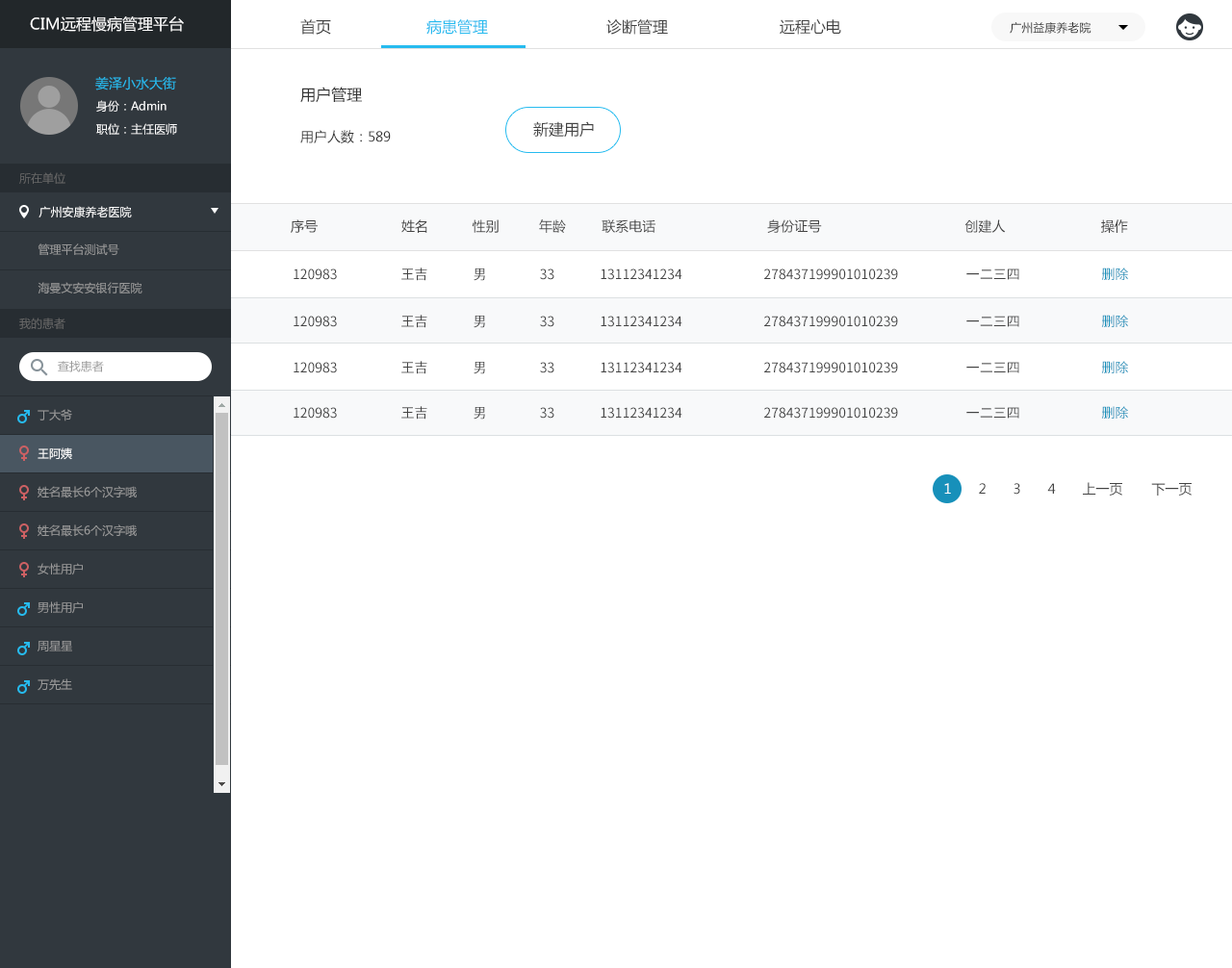
<style>
.page{position:relative;width:1232px;height:968px;background:#ffffff}
.page>*{position:absolute;margin:0}
.t1{font:15.4px "MicrosoftYaHei";color:#ffffff}
.t2{font:15.4px "MicrosoftYaHei";color:#434343}
.t3{font:15.4px "MicrosoftYaHei";color:#26bbef}
.t4{font:11.5px "MicrosoftYaHei";color:#333333}
.t5{font:13.5px "MicrosoftYaHei";color:#26bbef}
.t6{font:15.4px "MicrosoftYaHei";color:#333333}
.t7{font:11.5px "MicrosoftYaHei";color:#ffffff}
.t8{font:13.5px "MicrosoftYaHei";color:#333333}
.t9{font:11.5px "MicrosoftYaHei";color:#666666}
.t10{font:13.5px "MicrosoftYaHei";color:#434343}
.t11{font:11.5px "MicrosoftYaHei";color:#999999}
.t12{font:13.5px "NotoSansHans-Regular";color:#434343}
.t13{font:13.5px "NotoSansHans-Regular";color:#1790ba}
.t14{font:11.5px/19.2px "MicrosoftYaHei";color:#999999}
.t15{font:11.5px/19.2px "MicrosoftYaHei";color:#ffffff}
.t16{font:13.5px "MicrosoftYaHei";color:#ffffff}
</style>
<div class="page">
<p class="t1" style="left:30px;top:16px;width:154px;height:16px">CIM远程慢病管理平台</p>
<p class="t2" style="left:300px;top:19px;width:31px;height:16px">首页</p>
<p class="t3" style="left:426px;top:19px;width:62px;height:16px">病患管理</p>
<p class="t2" style="left:606px;top:19px;width:235px;height:16px">诊断管理    远程心电</p>
<p class="t4" style="left:1009px;top:22px;width:82px;height:12px">广州益康养老院</p>
<p class="t5" style="left:95px;top:76px;width:81px;height:14px">姜泽小水大街</p>
<p class="t6" style="left:300px;top:87px;width:62px;height:16px">用户管理</p>
<p class="t7" style="left:96px;top:100px;width:70px;height:12px">身份：Admin</p>
<p class="t7" style="left:96px;top:123px;width:81px;height:12px">职位：主任医师</p>
<p class="t2" style="left:533px;top:121px;width:61px;height:17px">新建用户</p>
<p class="t8" style="left:300px;top:130px;width:91px;height:13px">用户人数：589</p>
<p class="t9" style="left:19px;top:172px;width:46px;height:12px">所在单位</p>
<p class="t7" style="left:38px;top:206px;width:94px;height:12px">广州安康养老医院</p>
<p class="t10" style="left:291px;top:219px;width:837px;height:14px">序号                     姓名           性别          年龄         联系电话                            身份证号                                    创建人                        操作</p>
<p class="t11" style="left:38px;top:243px;width:81px;height:13px">管理平台测试号</p>
<p class="t12" style="left:294px;top:268px;width:834px;height:13px">120983                     王吉               男              33           13112341234                           278437199901010239       一二三四       <span class="t13">删除</span></p>
<p class="t11" style="left:38px;top:282px;width:104px;height:12px">海曼文安安银行医院</p>
<p class="t9" style="left:19px;top:318px;width:46px;height:11px">我的患者</p>
<p class="t12" style="left:294px;top:315px;width:834px;height:13px">120983                     王吉               男              33           13112341234                           278437199901010239       一二三四       <span class="t13">删除</span></p>
<p class="t11" style="left:58px;top:361px;width:46px;height:11px">查找患者</p>
<p class="t12" style="left:294px;top:361px;width:834px;height:13px">120983                     王吉               男              33           13112341234                           278437199901010239       一二三四       <span class="t13">删除</span></p>
<p class="t14" style="left:38px;top:409px;width:99px;height:282px">丁大爷<br><br><span class="t15">王阿姨<br></span><br>姓名最长6个汉字哦<br><br>姓名最长6个汉字哦<br><br>女性用户<br><br>男性用户<br><br>周星星<br><br>万先生<br><br>男女图表请区分<br><br>男性用户<br><br>男性用户<br><br>女性用户<br><br>工程师</p>
<p class="t12" style="left:294px;top:406px;width:834px;height:14px">120983                     王吉               男              33           13112341234                           278437199901010239       一二三四       <span class="t13">删除</span></p>
<p class="t10" style="left:944px;top:482px;width:247px;height:14px"><span class="t16">1</span> 2 3 4 上一页 下一页</p>
</div>
